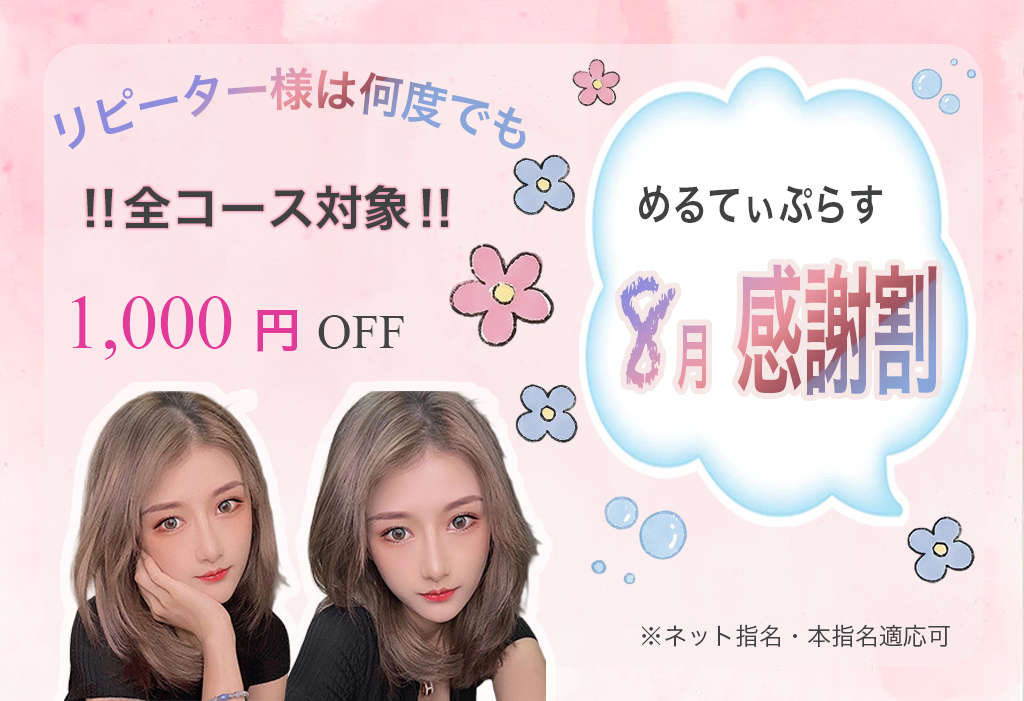
<style>
.page{position:relative;width:1024px;height:701px}
.page>*{position:absolute;margin:0}
.t1{font:46px "HiraKakuPro-W6";scale:0.9 1}
.t2{font:48px "HiraKakuPro-W6";color:#404242}
.t3{font:43.8px "HiraKakuPro-W6";color:#404242;scale:0.81 1}
.t4{font:140px "HiraKakuPro-W6";scale:0.49 1}
.t5{font:150px "Chalkduster";scale:0.49 1}
.t6{font:72px "HiraKakuPro-W6";scale:0.49 1}
.t7{font:76px "TimesNewRomanPSMT";color:#e23a99}
.t8{font:48px "HiraKakuPro-W6";color:#e23a99}
.t9{font:48px "TimesNewRomanPSMT";color:#424444}
.t10{font:24px "HiraKakuPro-W3";color:#404242}
</style>
<div class="page">
<p class="t1" style="left:53px;top:67px;width:473px;height:83px">リピーター様は何度でも</p>
<p class="t2" style="left:86px;top:185px;width:363px;height:45px">‼全コース対象‼</p>
<p class="t3" style="left:639px;top:185px;width:243px;height:39px">めるてぃぷらす</p>
<p class="t4" style="left:620px;top:263px;width:317px;height:132px"><span class="t5">8</span><span class="t6">月  </span>感謝割</p>
<p class="t7" style="left:72px;top:296px;width:332px;height:64px">1,000 <span class="t8">円 </span><span class="t9">OFF</span></p>
<p class="t10" style="left:641px;top:624px;width:309px;height:23px">※ネット指名・本指名適応可</p>
</div>
